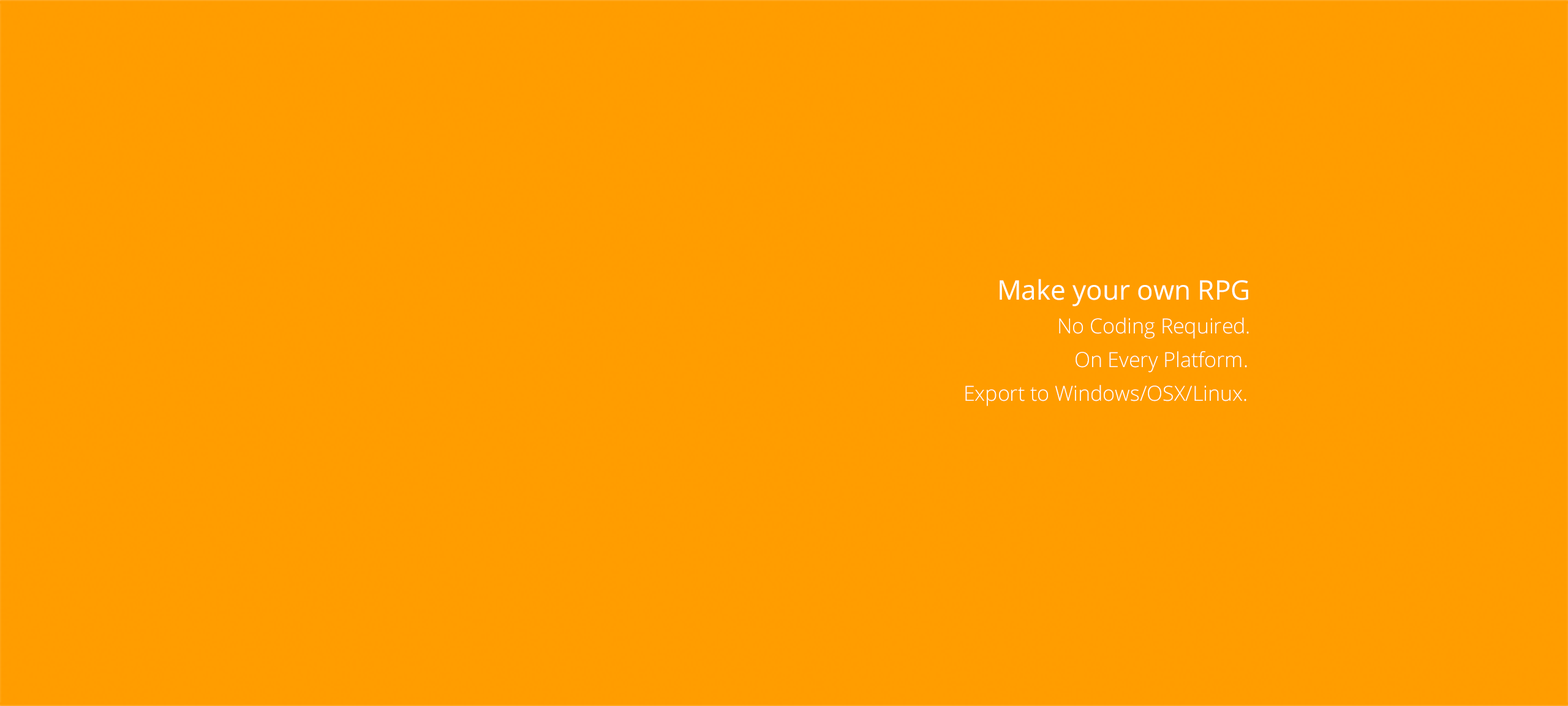
<style>
.page{position:relative;width:1568px;height:706px;background:#ff9d00}
.page>*{position:absolute;margin:0}
.t1{font:27px "OpenSans";color:#ffffff}
.t2{font:20.8px "OpenSans-Light";color:#ffffff}
</style>
<div class="page">
<p class="t1" style="left:1000px;top:279px;width:248px;height:27px">Make your own RPG</p>
<p class="t2" style="left:1059px;top:317px;width:190px;height:22px">No Coding Required.</p>
<p class="t2" style="left:1076px;top:351px;width:171px;height:21px">On Every Platform.</p>
<p class="t2" style="left:965px;top:385px;width:281px;height:21px">Export to Windows/OSX/Linux.</p>
</div>
